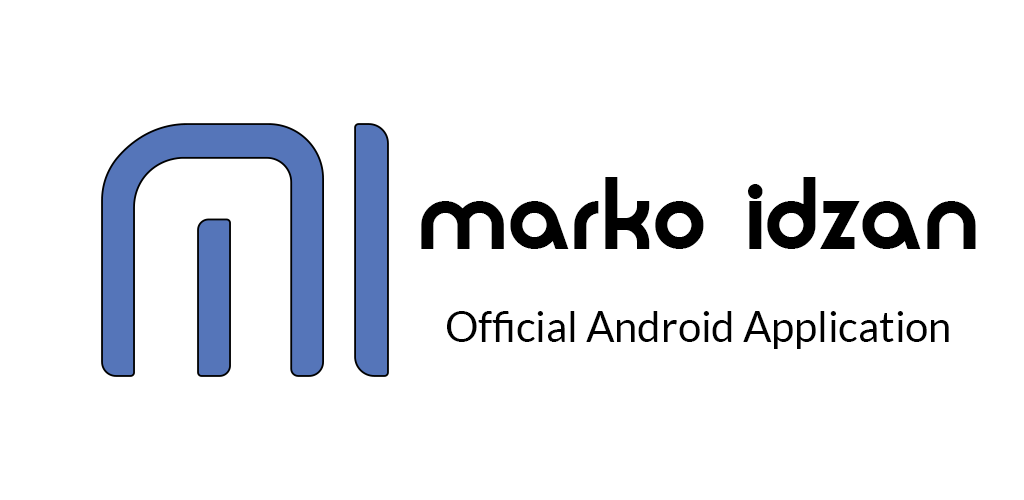
<style>
.page{position:relative;width:1024px;height:500px;background:#ffffff}
.page>*{position:absolute;margin:0}
.t1{font:90.3px "Moderna";color:#000000}
.t2{font:41.7px "Lato-Regular";color:#000000}
</style>
<div class="page">
<p class="t1" style="left:421px;top:177px;width:555px;height:72px">marko idzan</p>
<p class="t2" style="left:447px;top:311px;width:502px;height:38px">Official Android Application</p>
</div>
